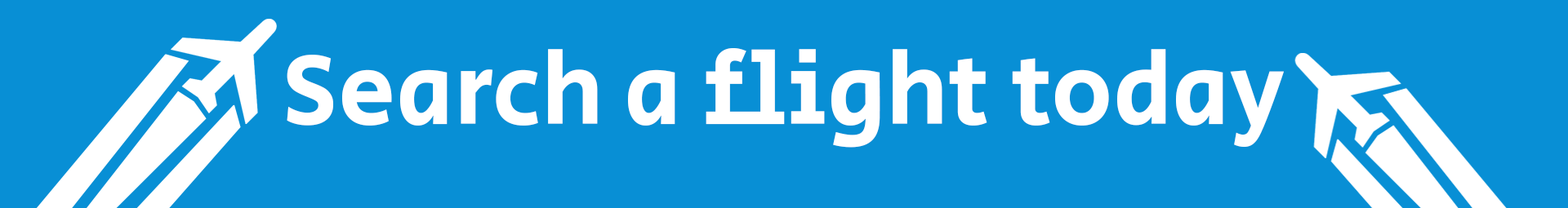
<style>
.page{position:relative;width:1568px;height:208px;background:#088fd5}
.page>*{position:absolute;margin:0}
.t1{font:102.1px "SecularOne-Regular";color:#ffffff}
</style>
<div class="page">
<p class="t1" style="left:287px;top:48px;width:997px;height:100px">Search a flight today</p>
</div>
